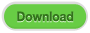
<style>
.page{position:relative;width:90px;height:33px;background:#68cd45}
.page>*{position:absolute;margin:0}
.t1{font:13.1px "HelveticaNeue-Bold";color:#32741b;scale:0.91 1}
</style>
<div class="page">
<p class="t1" style="left:17px;top:11px;width:57px;height:11px">Download</p>
</div>
